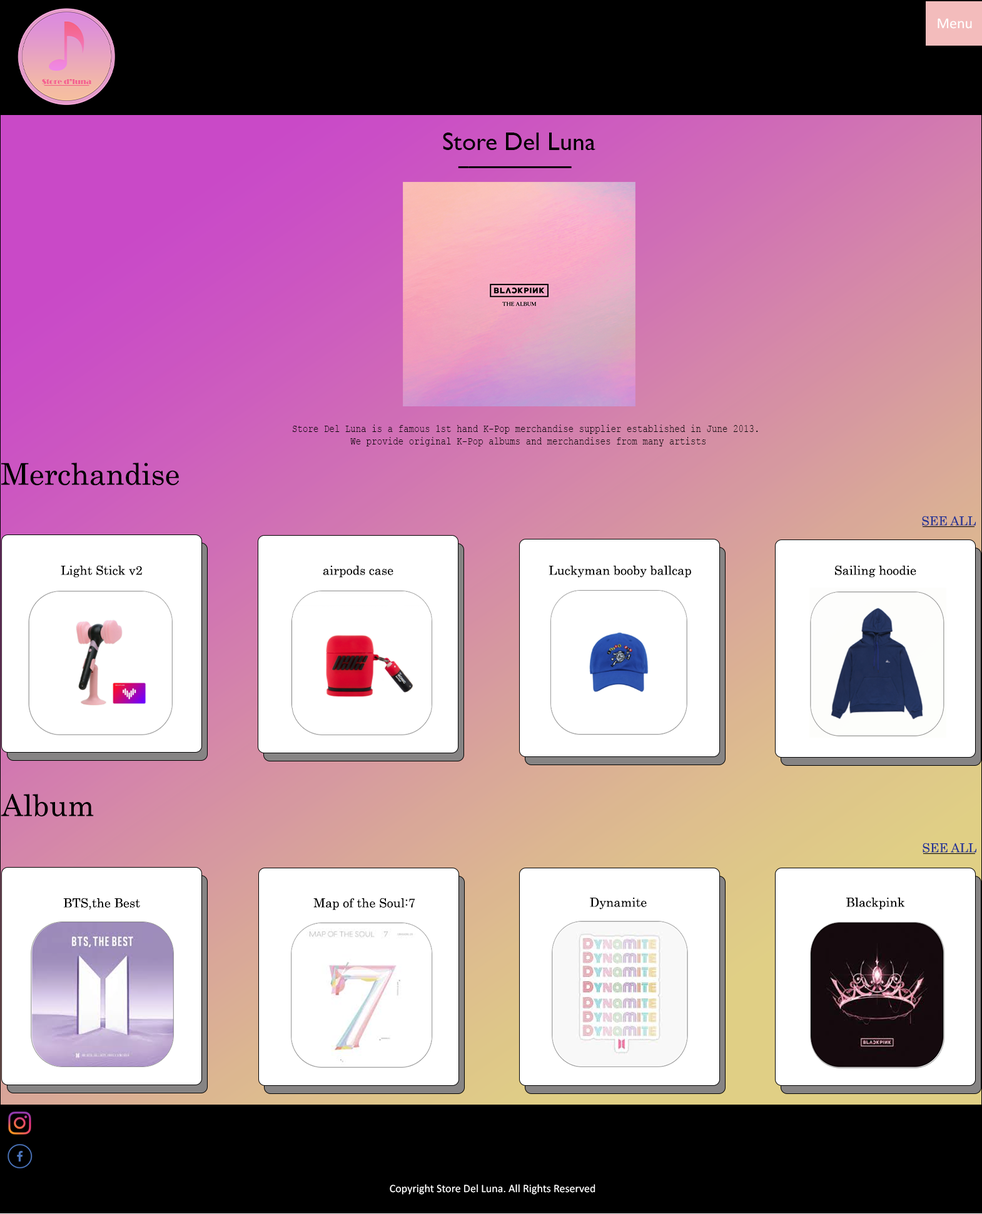
<style>
.page{position:relative;width:982px;height:1214px;background:#ffffff}
.page>*{position:absolute;margin:0}
.t1{font:15px "Calibri";color:#ffffff}
.t2{font:25px "GillSansMT";color:#000000}
.t3{font:34.6px "GillSansMT-Bold";color:#000000;scale:0.59 1}
.t4{font:10.9px "CourierNewPSMT";color:#000000;scale:0.81 1}
.t5{font:30px "Century";color:#000000}
.t6{font:12.5px "Century";color:#253494}
.t7{font:12.5px "Century";color:#000000}
.t8{font:11.3px "Calibri";color:#ffffff}
</style>
<div class="page">
<p class="t1" style="left:937px;top:18px;width:35px;height:11px">Menu</p>
<p class="t2" style="left:443px;top:133px;width:152px;height:17px">Store Del Luna</p>
<p class="t3" style="left:458px;top:166px;width:114px;height:2px">___________</p>
<p class="t4" style="left:293px;top:425px;width:465px;height:22px;text-align:center">Store Del Luna is a famous 1st hand K-Pop merchandise supplier established in June 2013. <br>We provide original K-Pop albums and merchandises from many artists</p>
<p class="t5" style="left:1px;top:463px;width:178px;height:23px">Merchandise</p>
<p class="t6" style="left:922px;top:516px;width:54px;height:10px">SEE ALL</p>
<p class="t7" style="left:61px;top:565px;width:81px;height:13px">Light Stick v2</p>
<p class="t7" style="left:323px;top:565px;width:70px;height:13px">airpods case</p>
<p class="t7" style="left:548px;top:565px;width:143px;height:13px">Luckyman booby ballcap</p>
<p class="t7" style="left:835px;top:565px;width:81px;height:13px">Sailing hoodie</p>
<p class="t5" style="left:1px;top:794px;width:93px;height:23px">Album</p>
<p class="t6" style="left:922px;top:843px;width:54px;height:10px">SEE ALL</p>
<p class="t7" style="left:63px;top:898px;width:77px;height:12px">BTS,the Best</p>
<p class="t7" style="left:313px;top:898px;width:102px;height:13px">Map of the Soul:7</p>
<p class="t7" style="left:590px;top:897px;width:57px;height:13px">Dynamite</p>
<p class="t7" style="left:846px;top:897px;width:59px;height:13px">Blackpink</p>
<p class="t8" style="left:390px;top:1184px;width:205px;height:11px">Copyright Store Del Luna. All Rights Reserved</p>
</div>
